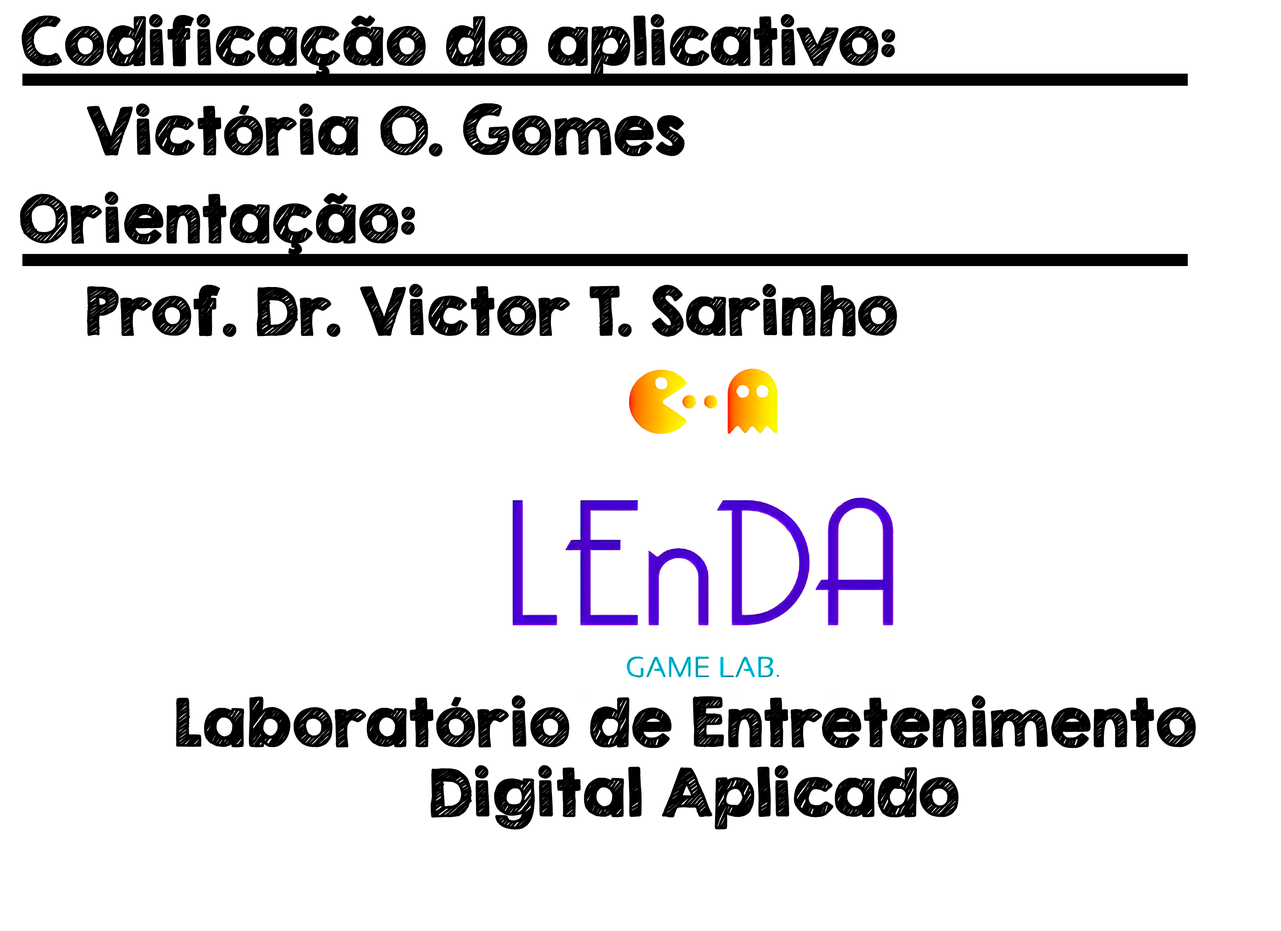
<style>
.page{position:relative;width:1281px;height:931px;background:#ffffff}
.page>*{position:absolute;margin:0}
.t1{font:58.3px "KGSecondChancesSketch";color:#000000;font-weight:bold}
</style>
<div class="page">
<p class="t1" style="left:21px;top:14px;width:874px;height:64px">Codificação do aplicativo:</p>
<p class="t1" style="left:87px;top:103px;width:598px;height:54px">Victória O. Gomes</p>
<p class="t1" style="left:20px;top:192px;width:395px;height:63px">Orientação:</p>
<p class="t1" style="left:87px;top:284px;width:810px;height:53px">Prof. Dr. Victor T. Sarinho</p>
<p class="t1" style="left:176px;top:695px;width:1020px;height:135px;text-align:center">Laboratório de Entretenimento <br>Digital Aplicado</p>
</div>
